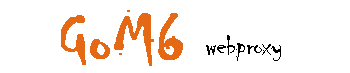
<style>
.page{position:relative;width:350px;height:73px;background:#ffffff}
.page>*{position:absolute;margin:0}
.t1{font:72px "Chiller-Regular";color:#e56814;font-weight:bold}
.t2{font:30px "Chiller-Regular";color:#000000}
</style>
<div class="page">
<p class="t1" style="left:61px;top:10px;width:122px;height:56px">GoM6</p>
<p class="t2" style="left:206px;top:35px;width:75px;height:26px">webproxy</p>
</div>
